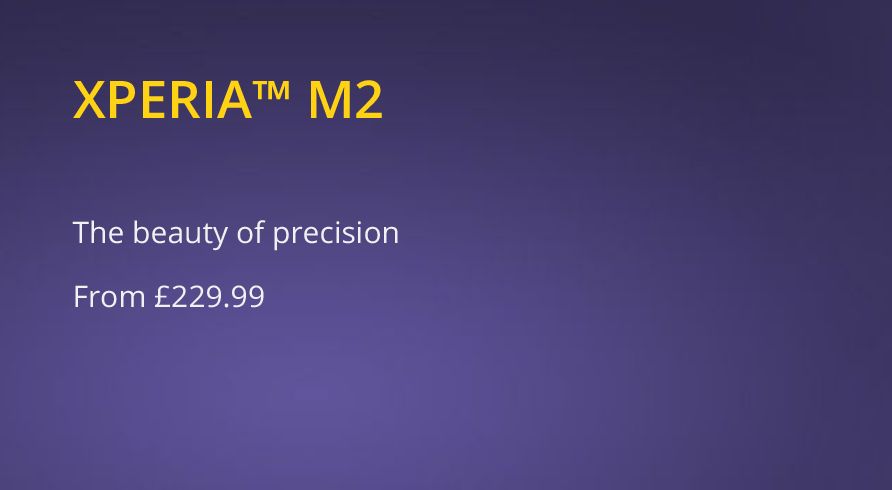
<style>
.page{position:relative;width:892px;height:490px}
.page>*{position:absolute;margin:0}
.t1{font:52.1px "OpenSans-Semibold";color:#ffd314;text-transform:uppercase}
.t2{font:29.7px "OpenSans";color:#f1f1f1}
</style>
<div class="page">
<p class="t1" style="left:73px;top:80px;width:309px;height:38px">Xperia™ M2</p>
<p class="t2" style="left:72px;top:220px;width:326px;height:31px">The beauty of precision</p>
<p class="t2" style="left:75px;top:285px;width:189px;height:23px">From £229.99</p>
</div>
